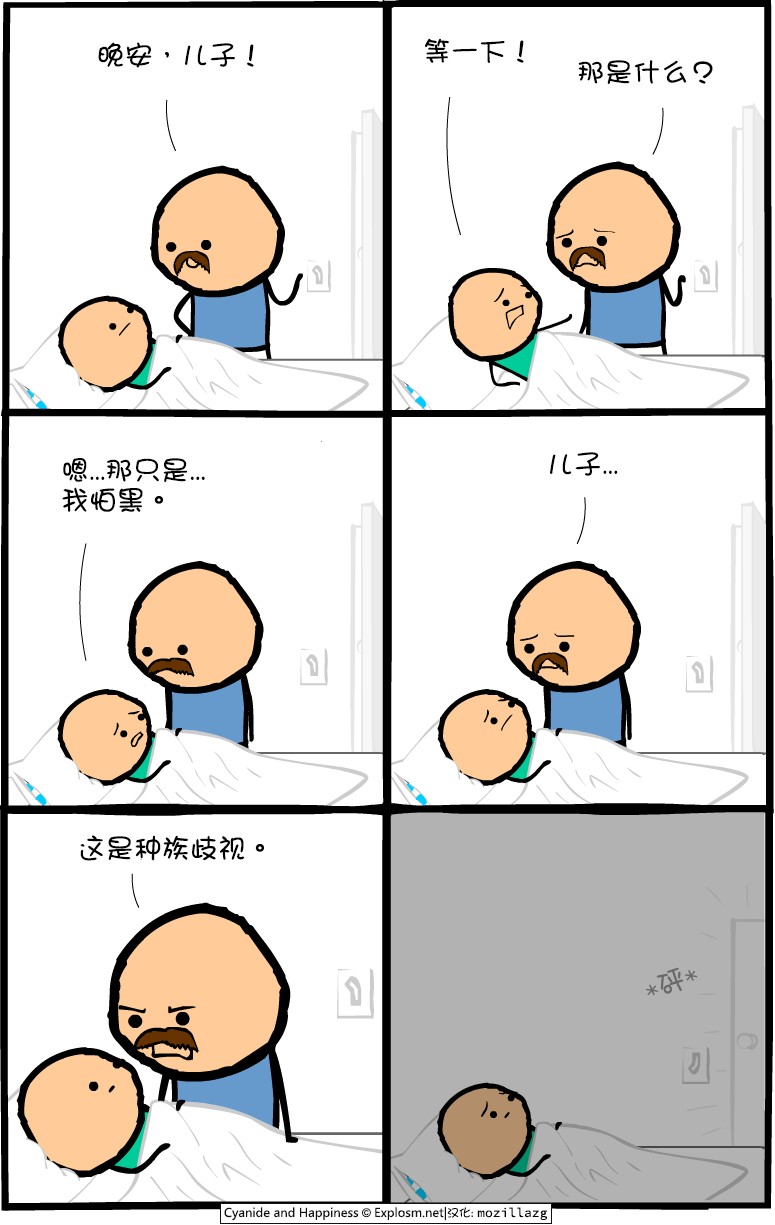
<style>
.page{position:relative;width:775px;height:1225px;background:#ffffff}
.page>*{position:absolute;margin:0}
.t1{font:28px "DFGirl";color:#000000}
.t2{font:28px/30px "DFGirl";color:#000000}
.t3{font:28px "DFGirl";color:#6a6a6a}
</style>
<div class="page">
<p class="t1" style="left:424px;top:38px;width:100px;height:26px">等一下！</p>
<p class="t1" style="left:98px;top:42px;width:156px;height:26px">晚安，儿子！</p>
<p class="t1" style="left:578px;top:60px;width:135px;height:25px">那是什么？</p>
<p class="t2" style="left:62px;top:458px;width:143px;height:54px">嗯...那只是...<br>我怕黑。</p>
<p class="t1" style="left:550px;top:452px;width:68px;height:24px">儿子...</p>
<p class="t1" style="left:80px;top:835px;width:184px;height:26px">这是种族歧视。</p>
<p class="t3" style="left:645px;top:967px;width:53px;height:29px;rotate:-21deg">*砰*</p>
</div>
